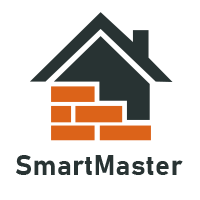
<style>
.page{position:relative;width:200px;height:200px;background:#ffffff}
.page>*{position:absolute;margin:0}
.t1{font:28px "Bahnschrift-Bold";letter-spacing:0.01em;color:#283333}
</style>
<div class="page">
<p class="t1" style="left:16px;top:155px;width:167px;height:20px">SmartMaster</p>
</div>
